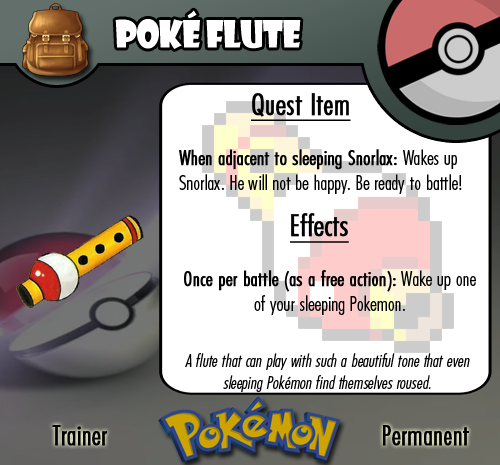
<style>
.page{position:relative;width:500px;height:465px;background:#ffffff}
.page>*{position:absolute;margin:0}
.t1{font:36.7px "ShowcardGothic-Reg";letter-spacing:-0.025em;color:#ffffff;scale:0.91 1}
.t2{font:20.8px "FuturaCondensedBQ-Light";color:#010101}
.t3{font:27.8px "FuturaCondensedBQ-Light";color:#010101;font-weight:bold}
.t4{font:30.6px "FuturaCondensedBQ-Light";color:#010101;font-weight:bold;text-decoration:underline}
.t5{font:20.8px "FuturaCondensedBQ-Light";color:#010101;font-weight:bold}
.t6{font:18.1px "FuturaCondensedBQ-Light";color:#010101;font-style:italic}
</style>
<div class="page">
<p class="t1" style="left:115px;top:10px;width:186px;height:39px">Poké Flute</p>
<p class="t2" style="left:179px;top:93px;width:297px;height:222px"><span class="t3">  </span><span class="t4">Quest Item<br></span><span class="t5"><br>When adjacent to sleeping Snorlax: </span>Wakes up Snorlax. He will not be happy. Be ready to battle!<br><br>       <span class="t4">Effects<br><br></span><span class="t5">Once per battle (as a free action): </span>Wake up one of your sleeping Pokemon.</p>
<p class="t6" style="left:185px;top:353px;width:285px;height:39px;text-align:center">A flute that can play with such a beautiful tone that even sleeping Pokémon find themselves roused.</p>
<p class="t3" style="left:52px;top:425px;width:55px;height:21px">Trainer</p>
<p class="t3" style="left:383px;top:425px;width:86px;height:21px">Permanent</p>
</div>
